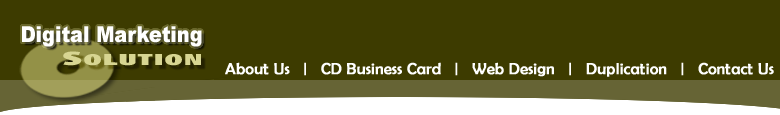
<style>
.page{position:relative;width:780px;height:115px;background:#3d3b00}
.page>*{position:absolute;margin:0}
.t1{font:16px "BerlinSansFB-Reg";color:#ffffff;font-weight:bold}
</style>
<div class="page">
<p class="t1" style="left:225px;top:62px;width:549px;height:15px">About Us   |   CD Business Card   |   Web Design   |   Duplication   |   Contact Us</p>
</div>
